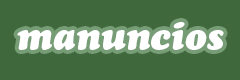
<style>
.page{position:relative;width:240px;height:80px;background:#3f693d}
.page>*{position:absolute;margin:0}
.t1{font:37px "CooperBlackStd-Italic";color:#ffffff}
</style>
<div class="page">
<p class="t1" style="left:17px;top:22px;width:207px;height:28px">manuncios</p>
</div>
